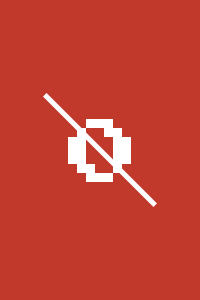
<style>
.page{position:relative;width:200px;height:300px;background:#c0392b}
.page>*{position:absolute;margin:0}
.t1{font:72px "PressStart2P-Regular";color:#ffffff}
</style>
<div class="page">
<p class="t1" style="left:68px;top:119px;width:63px;height:63px">0</p>
</div>
